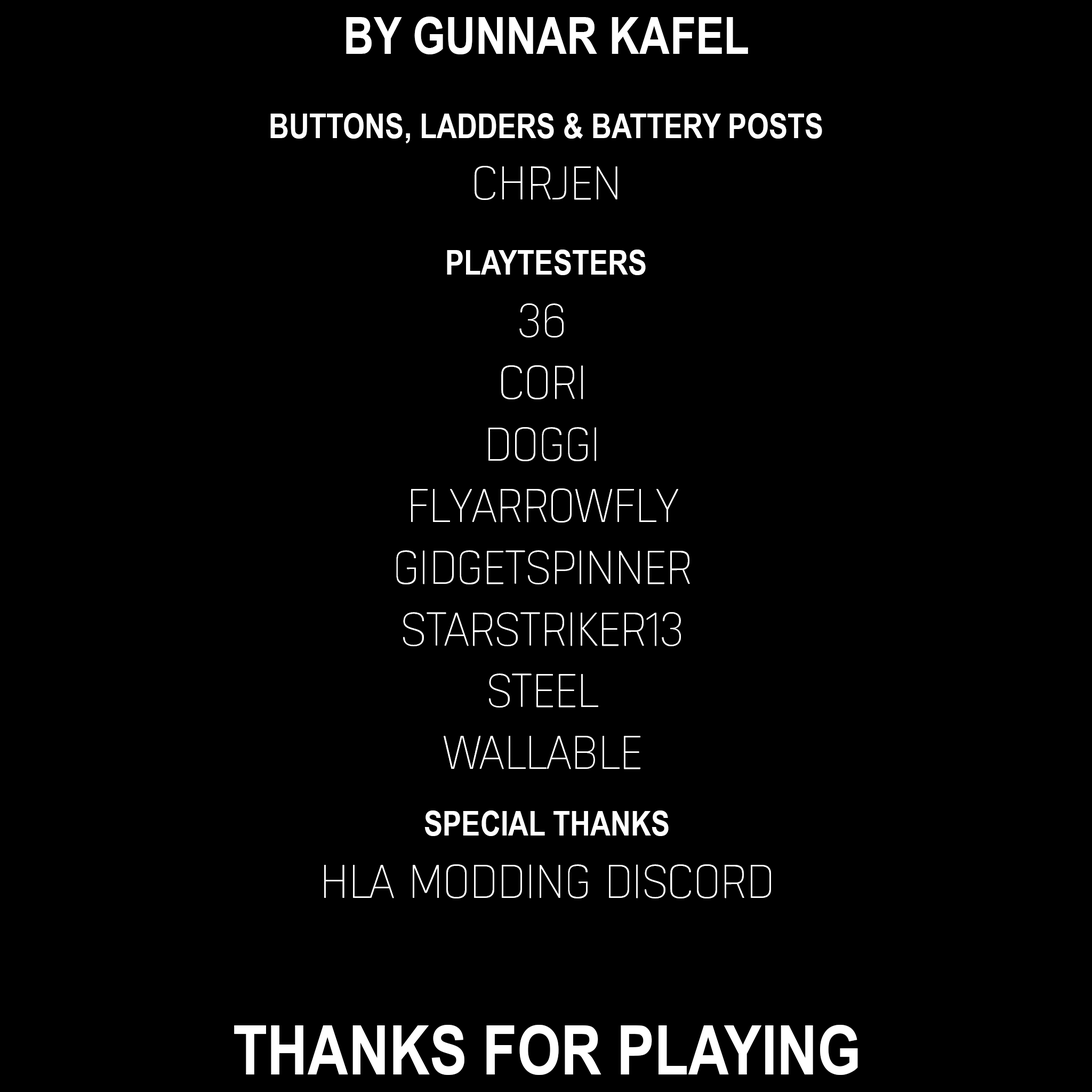
<style>
.page{position:relative;width:1092px;height:1092px;background:#000000}
.page>*{position:absolute;margin:0}
.t1{font:51.4px "ArialNarrow-Bold";color:#ffffff;text-transform:uppercase}
.t2{font:34.3px "ArialNarrow-Bold";color:#ffffff;text-transform:uppercase}
.t3{font:51.4px "Raju-Light";color:#ffffff;text-transform:uppercase}
.t4{font:68.5px "ArialNarrow-Bold";color:#ffffff;text-transform:uppercase}
</style>
<div class="page">
<p class="t1" style="left:346px;top:17px;width:402px;height:37px">BY GUNNAR KAFEL</p>
<p class="t2" style="left:270px;top:113px;width:552px;height:30px">BUTTONS, LADDERS &amp; BATTERY POSTS</p>
<p class="t3" style="left:475px;top:166px;width:142px;height:34px">CHRJEN</p>
<p class="t2" style="left:447px;top:250px;width:199px;height:25px">PLAYTESTERS</p>
<p class="t3" style="left:396px;top:303px;width:294px;height:466px;text-align:center">36<br>CORI<br>DOGGI<br>FLYARROWFLY<br>GIDGETSPINNER<br>STARSTRIKER13<br>STEEL<br>WALLABLE</p>
<p class="t2" style="left:424px;top:810px;width:245px;height:26px">SPECIAL THANKS</p>
<p class="t3" style="left:324px;top:864px;width:447px;height:34px">HLA MODDING DISCORD</p>
<p class="t4" style="left:234px;top:1025px;width:624px;height:50px">THANKS FOR PLAYING</p>
</div>
